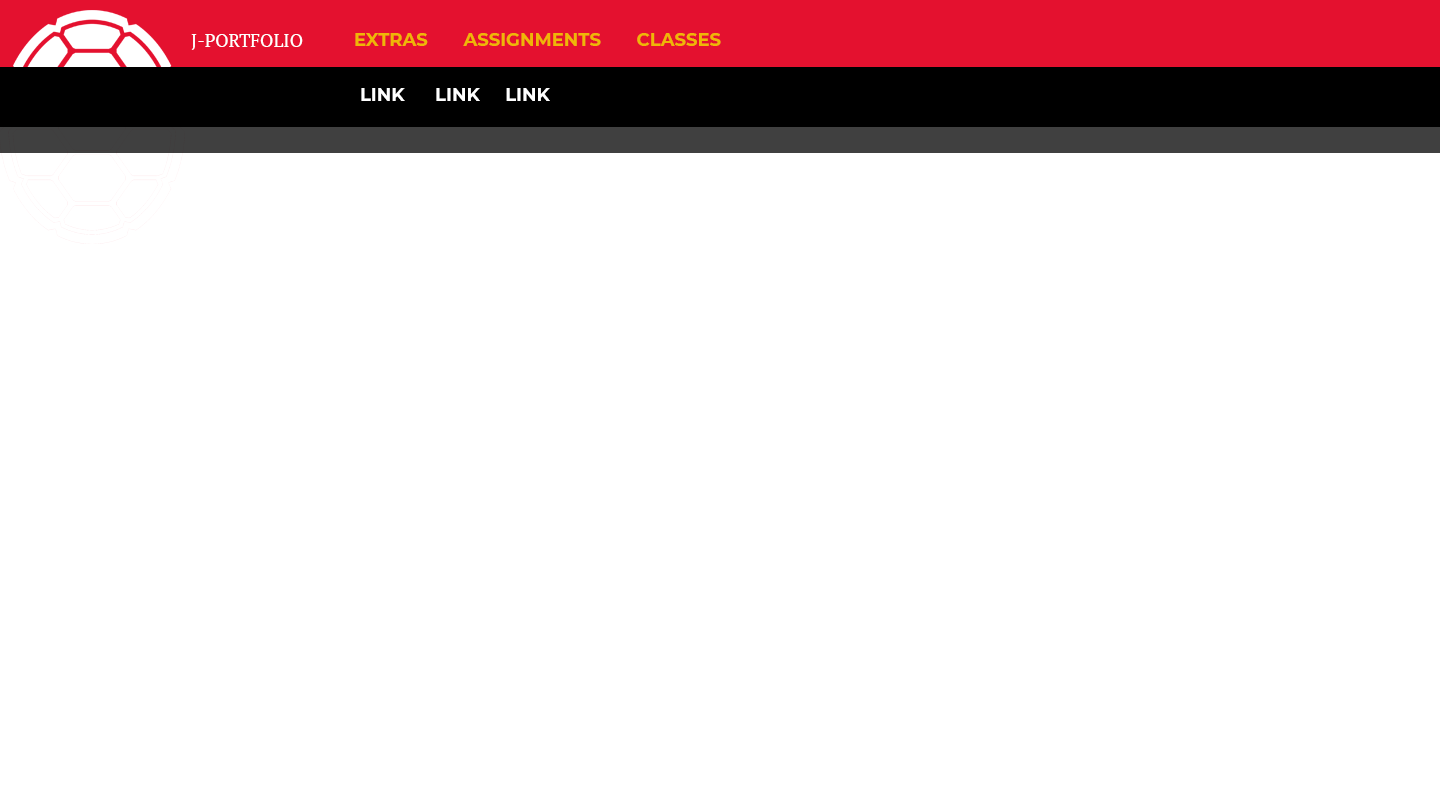
<style>
.page{position:relative;width:1440px;height:803px;background:#ffffff}
.page>*{position:absolute;margin:0}
.t1{font:18px "PTSerif-Regular";color:#ffffff}
.t2{font:18px "Montserrat-Bold";color:#efb607}
.t3{font:18px "Montserrat-Bold";color:#ffffff}
</style>
<div class="page">
<p class="t1" style="left:191px;top:34px;width:112px;height:16px">J-PORTFOLIO</p>
<p class="t2" style="left:355px;top:33px;width:366px;height:13px">EXTRAS       ASSIGNMENTS       CLASSES</p>
<p class="t3" style="left:361px;top:88px;width:189px;height:13px">LINK      LINK     LINK</p>
</div>
